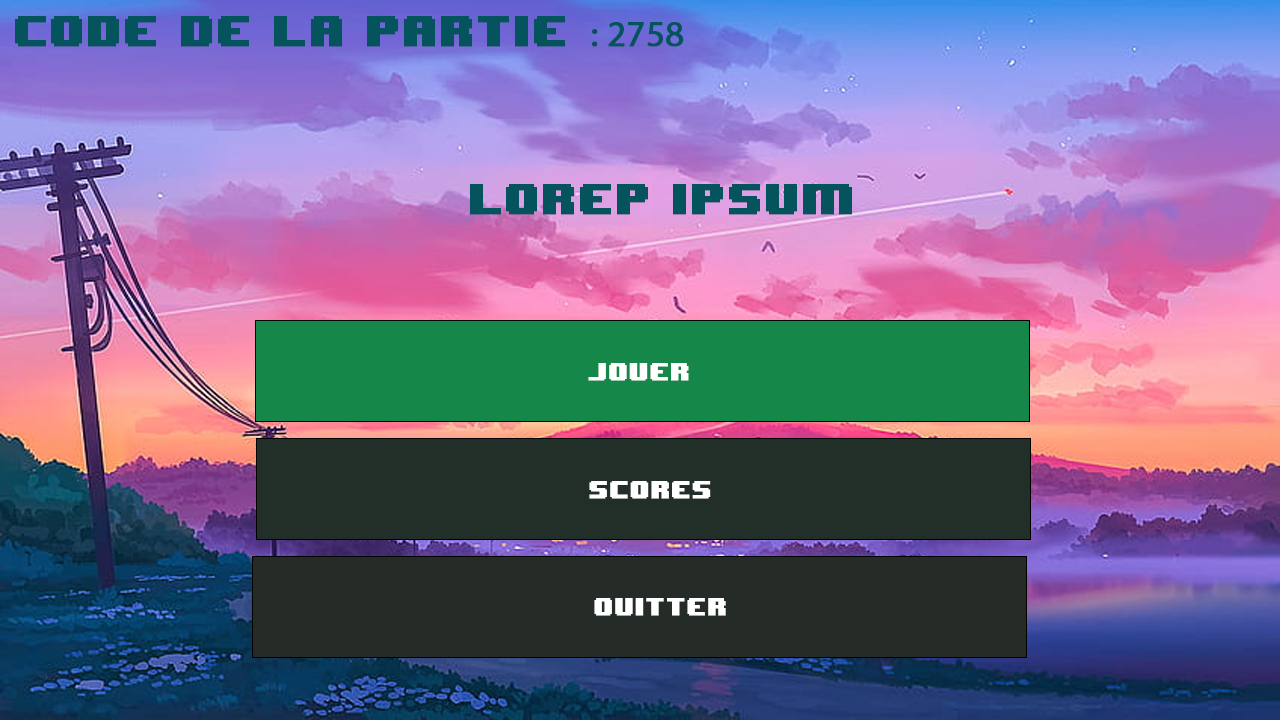
<style>
.page{position:relative;width:1280px;height:720px}
.page>*{position:absolute;margin:0}
.t1{font:36px "8BITWONDERNominal";color:#05535c;font-weight:bold}
.t2{font:36px "MyriadPro-Regular";color:#05535c;font-weight:bold}
.t3{font:20.1px "8BITWONDERNominal";color:#ffffff;font-weight:bold}
</style>
<div class="page">
<p class="t1" style="left:15px;top:16px;width:669px;height:31px">Code de la partie <span class="t2">: 2758</span></p>
<p class="t1" style="left:470px;top:184px;width:382px;height:31px">LOREP IPSUM</p>
<p class="t3" style="left:588px;top:363px;width:101px;height:18px">JOUER</p>
<p class="t3" style="left:589px;top:481px;width:122px;height:18px">scoreS</p>
<p class="t3" style="left:594px;top:598px;width:132px;height:18px">QUITTER</p>
</div>
